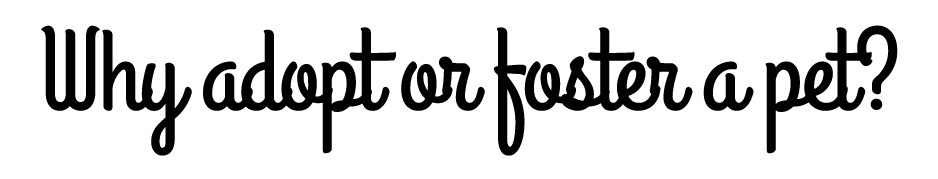
<style>
.page{position:relative;width:938px;height:179px;background:#ffffff}
.page>*{position:absolute;margin:0}
.t1{font:116.7px "GrandHotel-Regular";letter-spacing:-0.025em;color:#000000}
</style>
<div class="page">
<p class="t1" style="left:41px;top:25px;width:857px;height:131px">Why adopt or foster a pet?</p>
</div>
